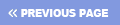
<style>
.page{position:relative;width:120px;height:25px;background:#8299df}
.page>*{position:absolute;margin:0}
.t1{font:18.2px "Arial-Black";color:#ffffff;scale:0.9 1}
</style>
<div class="page">
<p class="t1" style="left:21px;top:9px;width:88px;height:8px">PREVIOUS PAGE</p>
</div>
